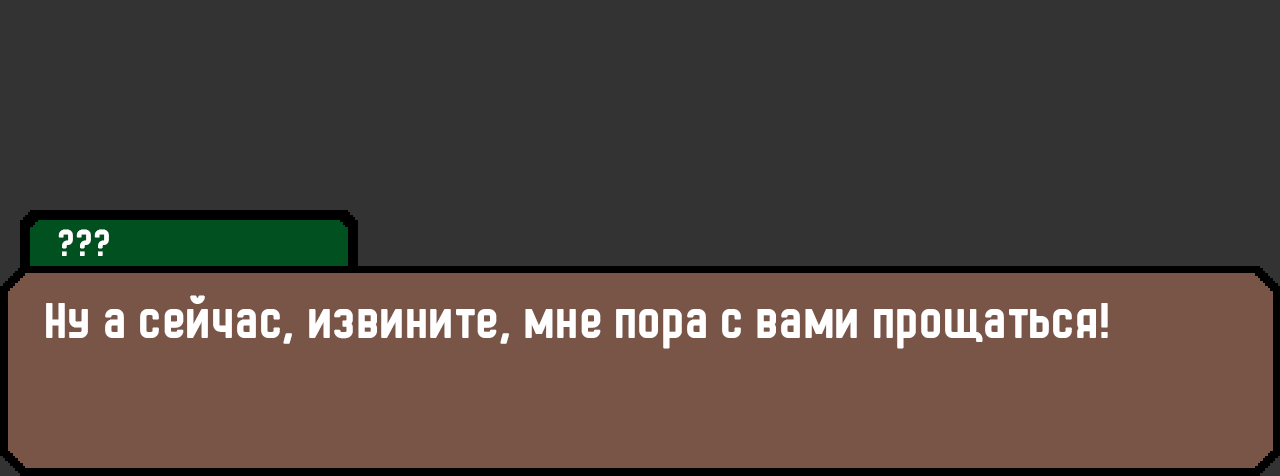
<style>
.page{position:relative;width:1280px;height:476px;background:#333333}
.page>*{position:absolute;margin:0}
.t1{font:36px "HermanoMayor";color:#ffffff}
.t2{font:48px "HermanoMayor";color:#ffffff}
</style>
<div class="page">
<p class="t1" style="left:58px;top:229px;width:51px;height:27px">???</p>
<p class="t2" style="left:46px;top:295px;width:1062px;height:54px">Ну а сейчас, извините, мне пора с вами прощаться!</p>
</div>
